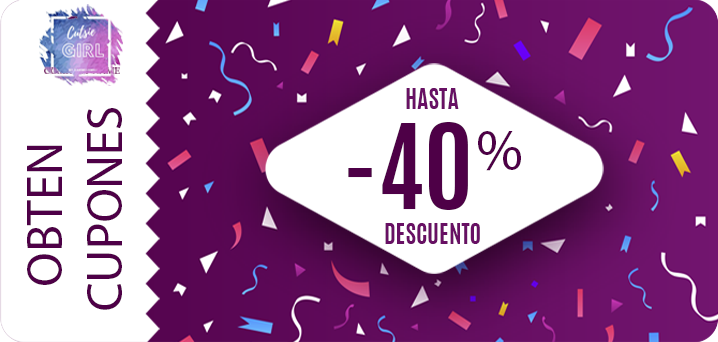
<style>
.page{position:relative;width:718px;height:342px;background:#ffffff}
.page>*{position:absolute;margin:0}
.t1{font:9.4px "Cabin-Bold"}
.t2{font:24px "Antonio-Bold";color:#681064}
.t3{font:50.3px "MyriadPro-Regular";color:#4e0047}
.t4{font:99.9px "Antonio-Bold";color:#4e0047}
.t5{font:58.5px "MyriadPro-Regular";color:#4e0047}
</style>
<div class="page">
<p class="t1" style="left:44px;top:67px;width:76px;height:7px">COMPANY NAME</p>
<p class="t2" style="left:406px;top:88px;width:53px;height:21px">HASTA</p>
<p class="t3" style="left:27px;top:108px;width:95px;height:202px;text-align:center">OBTEN <br>CUPONES</p>
<p class="t4" style="left:348px;top:122px;width:120px;height:88px">-40</p>
<p class="t5" style="left:478px;top:131px;width:43px;height:40px">%</p>
<p class="t2" style="left:385px;top:223px;width:95px;height:21px">DESCUENTO</p>
</div>
